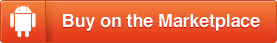
<style>
.page{position:relative;width:277px;height:43px}
.page>*{position:absolute;margin:0}
.t1{font:18px "Helvetica-Bold";letter-spacing:-0.01em;color:#ffffff}
</style>
<div class="page">
<p class="t1" style="left:63px;top:14px;width:197px;height:17px">Buy on the Marketplace</p>
</div>
